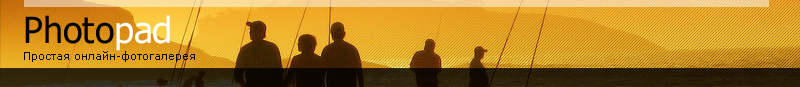
<style>
.page{position:relative;width:800px;height:87px}
.page>*{position:absolute;margin:0}
.t1{font:36px "Tahoma";color:#000000}
.t2{font:36px "Tahoma";color:#ffffff}
.t3{font:11px "Verdana";color:#000000}
</style>
<div class="page">
<p class="t1" style="left:25px;top:15px;width:145px;height:36px">Photo<span class="t2">pad</span></p>
<p class="t3" style="left:24px;top:51px;width:171px;height:11px">Простая онлайн-фотогалерея</p>
</div>
